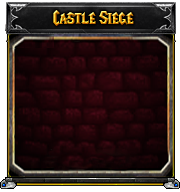
<style>
.page{position:relative;width:180px;height:192px}
.page>*{position:absolute;margin:0}
.t1{font:18.7px "LifeCraft"}
</style>
<div class="page">
<p class="t1" style="left:53px;top:10px;width:81px;height:16px">Castle Siege</p>
</div>
